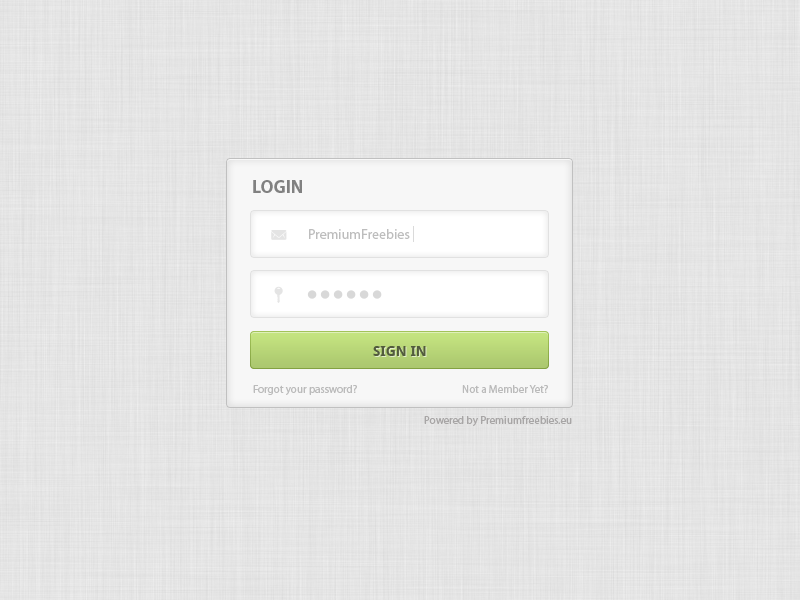
<style>
.page{position:relative;width:800px;height:600px}
.page>*{position:absolute;margin:0}
.t1{font:18px "MyriadPro-Bold";color:#818181}
.t2{font:14px "MyriadPro-Regular";color:#bdbdbd}
.t3{font:14px "DroidSans-Bold";color:#525b3d}
.t4{font:11px "MyriadPro-Regular";color:#bbbbbb}
.t5{font:11px "MyriadPro-Regular";color:#a8a6a6}
</style>
<div class="page">
<p class="t1" style="left:253px;top:180px;width:49px;height:13px">LOGIN</p>
<p class="t2" style="left:309px;top:229px;width:101px;height:10px">PremiumFreebies</p>
<p class="t3" style="left:373px;top:346px;width:53px;height:10px">SIGN IN</p>
<p class="t4" style="left:253px;top:385px;width:104px;height:10px">Forgot your password?</p>
<p class="t4" style="left:462px;top:385px;width:86px;height:8px">Not a Member Yet?</p>
<p class="t5" style="left:424px;top:416px;width:148px;height:10px">Powered by Premiumfreebies.eu</p>
</div>
